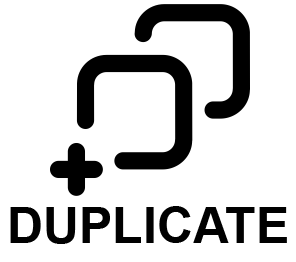
<style>
.page{position:relative;width:296px;height:262px;background:#ffffff}
.page>*{position:absolute;margin:0}
.t1{font:50px "Arial-BoldMT";color:#000000}
</style>
<div class="page">
<p class="t1" style="left:10px;top:206px;width:277px;height:38px">DUPLICATE</p>
</div>
